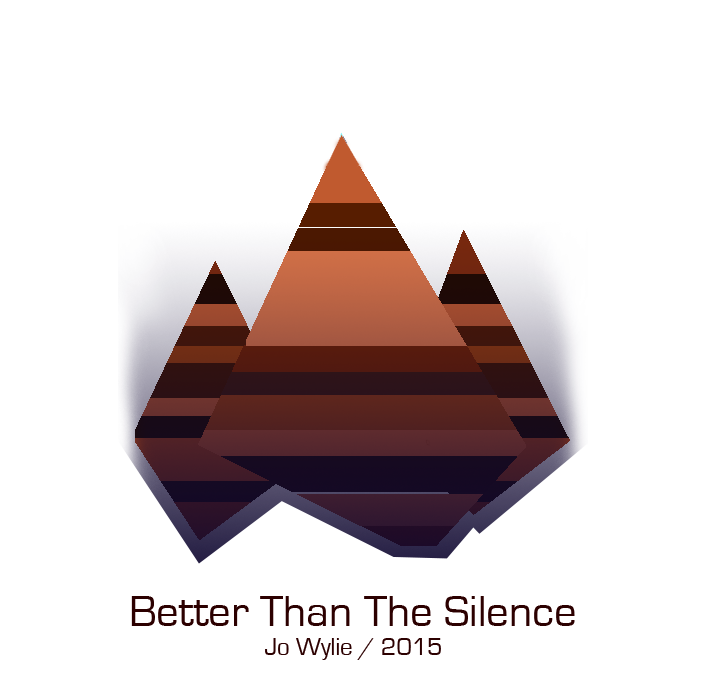
<style>
.page{position:relative;width:705px;height:691px;background:#ffffff}
.page>*{position:absolute;margin:0}
.t1{font:45px "EurostileRegular";color:#2c0000}
</style>
<div class="page">
<p class="t1" style="left:131px;top:596px;width:444px;height:30px">Better Than The Silence</p>
</div>
